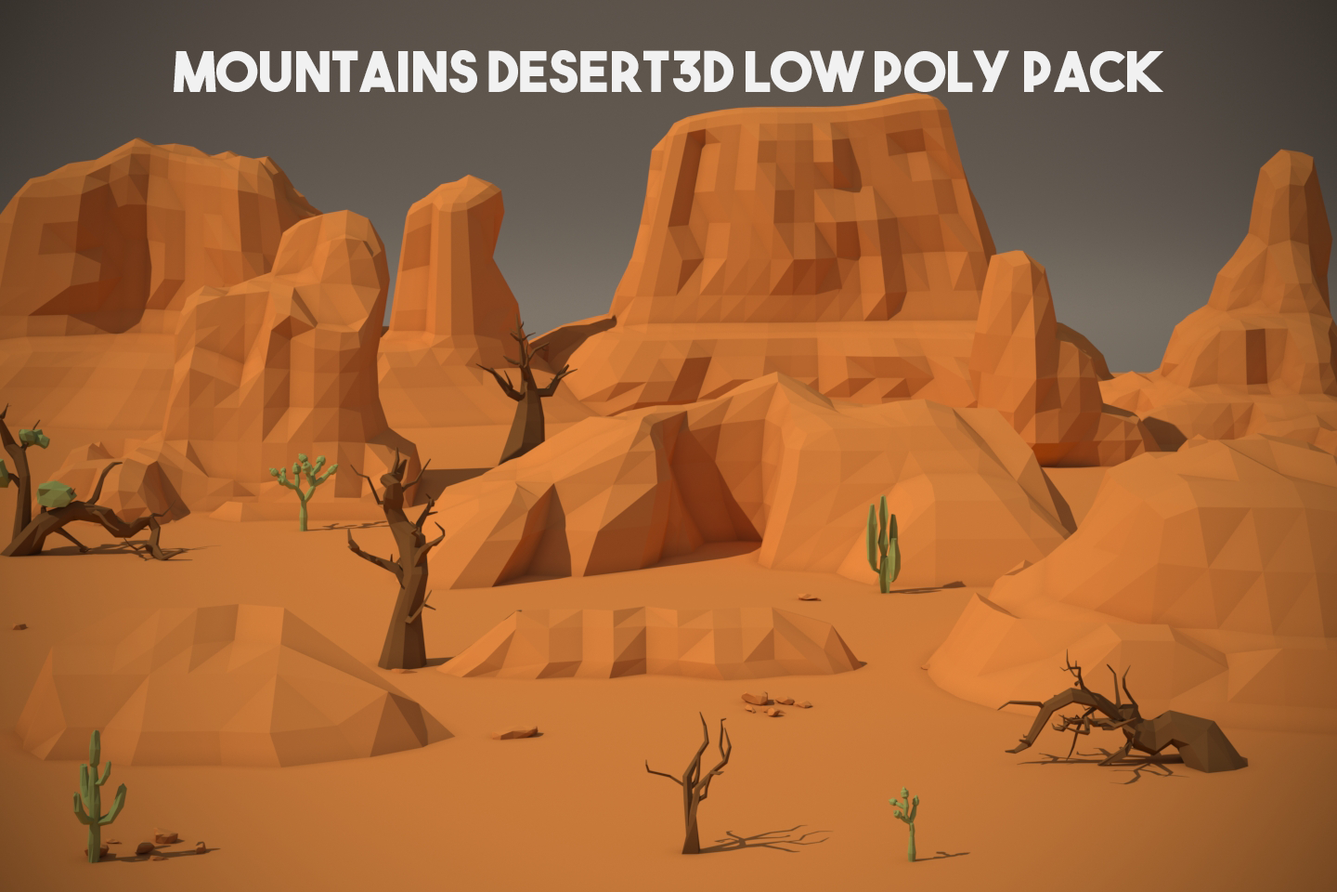
<style>
.page{position:relative;width:1337px;height:892px}
.page>*{position:absolute;margin:0}
.t1{font:55.7px "TheBoldFont";color:#f1f1f1}
</style>
<div class="page">
<p class="t1" style="left:174px;top:50px;width:990px;height:43px">Mountains desert3D Low Poly Pack</p>
</div>
